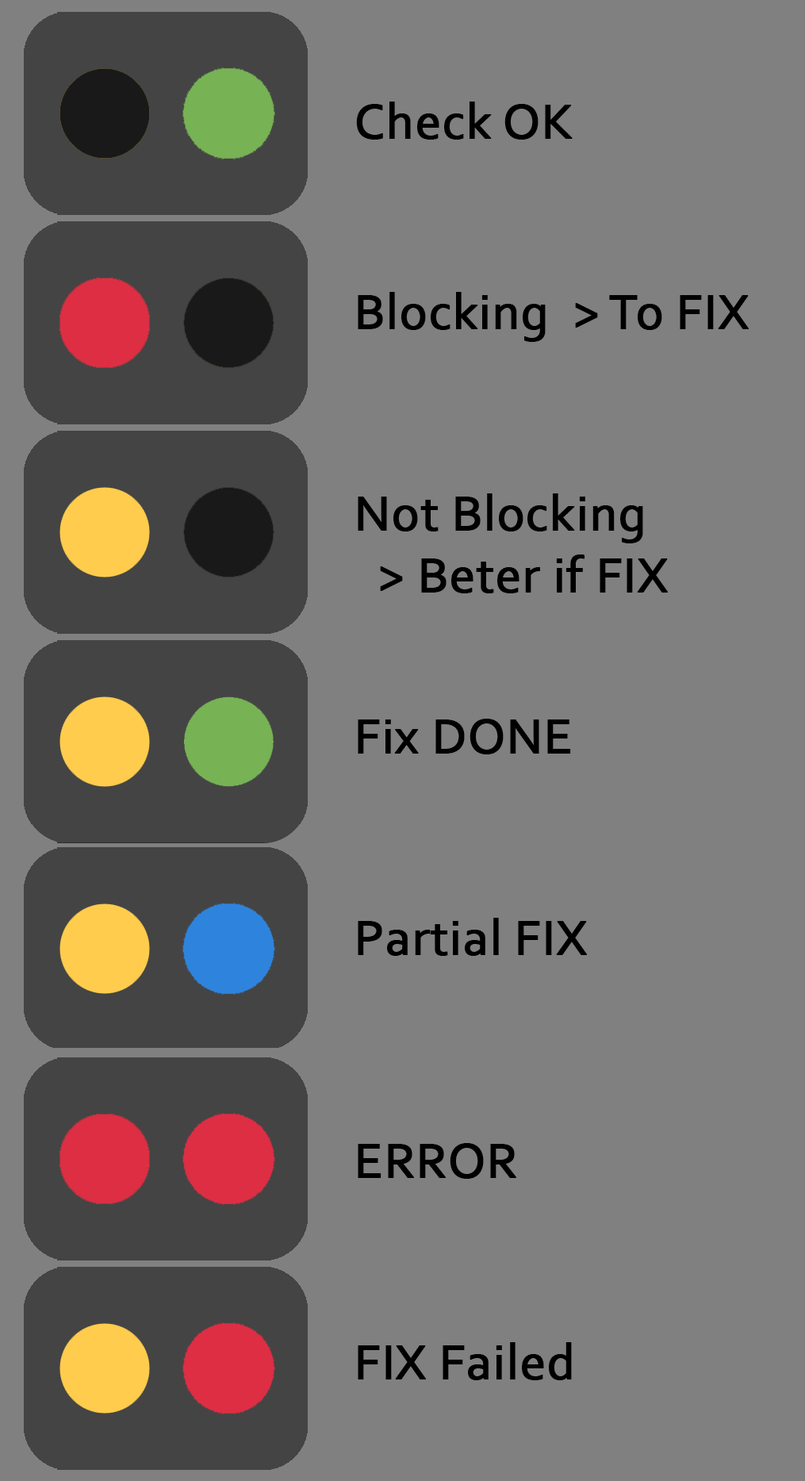
<style>
.page{position:relative;width:805px;height:1481px;background:#808080}
.page>*{position:absolute;margin:0}
.t1{font:51.6px "Corbel";color:#000000;font-weight:bold}
</style>
<div class="page">
<p class="t1" style="left:356px;top:102px;width:217px;height:38px">Check OK</p>
<p class="t1" style="left:358px;top:292px;width:391px;height:50px">Blocking  &gt; To FIX</p>
<p class="t1" style="left:358px;top:493px;width:310px;height:100px">Not Blocking<br>  &gt; Beter if FIX</p>
<p class="t1" style="left:358px;top:719px;width:213px;height:35px">Fix DONE</p>
<p class="t1" style="left:358px;top:918px;width:229px;height:38px">Partial FIX</p>
<p class="t1" style="left:358px;top:1143px;width:158px;height:36px">ERROR</p>
<p class="t1" style="left:358px;top:1342px;width:214px;height:38px">FIX Failed</p>
</div>
